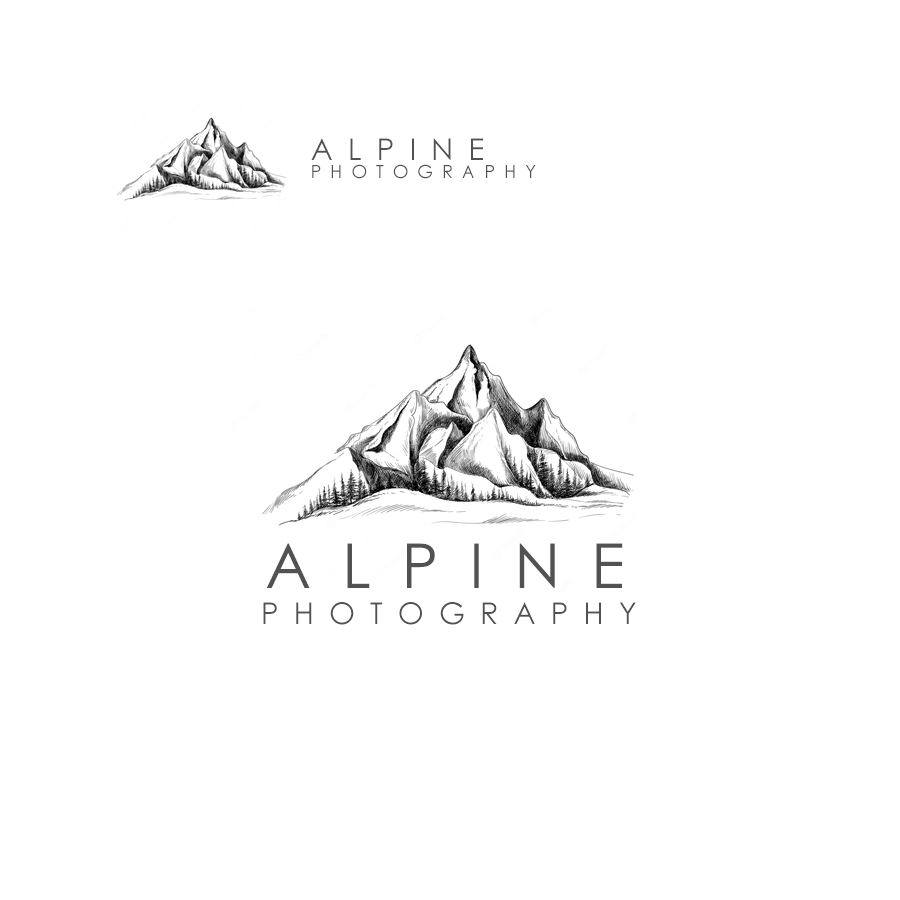
<style>
.page{position:relative;width:900px;height:900px;background:#ffffff}
.page>*{position:absolute;margin:0}
.t1{font:18px/18px "CenturyGothic";letter-spacing:0.5em;color:#525252}
.t2{font:30px/18px "CenturyGothic";letter-spacing:0.5em;color:#525252}
.t3{font:30px "CenturyGothic";letter-spacing:0.5em;color:#525252}
.t4{font:62px "CenturyGothic";letter-spacing:0.5em;color:#525252}
</style>
<div class="page">
<p class="t1" style="left:311px;top:138px;width:225px;height:41px"><span class="t2">ALPINE<br></span>PHOTOGRAPHY</p>
<p class="t3" style="left:263px;top:543px;width:373px;height:82px;text-align:center"><span class="t4">ALPINE<br></span> PHOTOGRAPHY</p>
</div>
